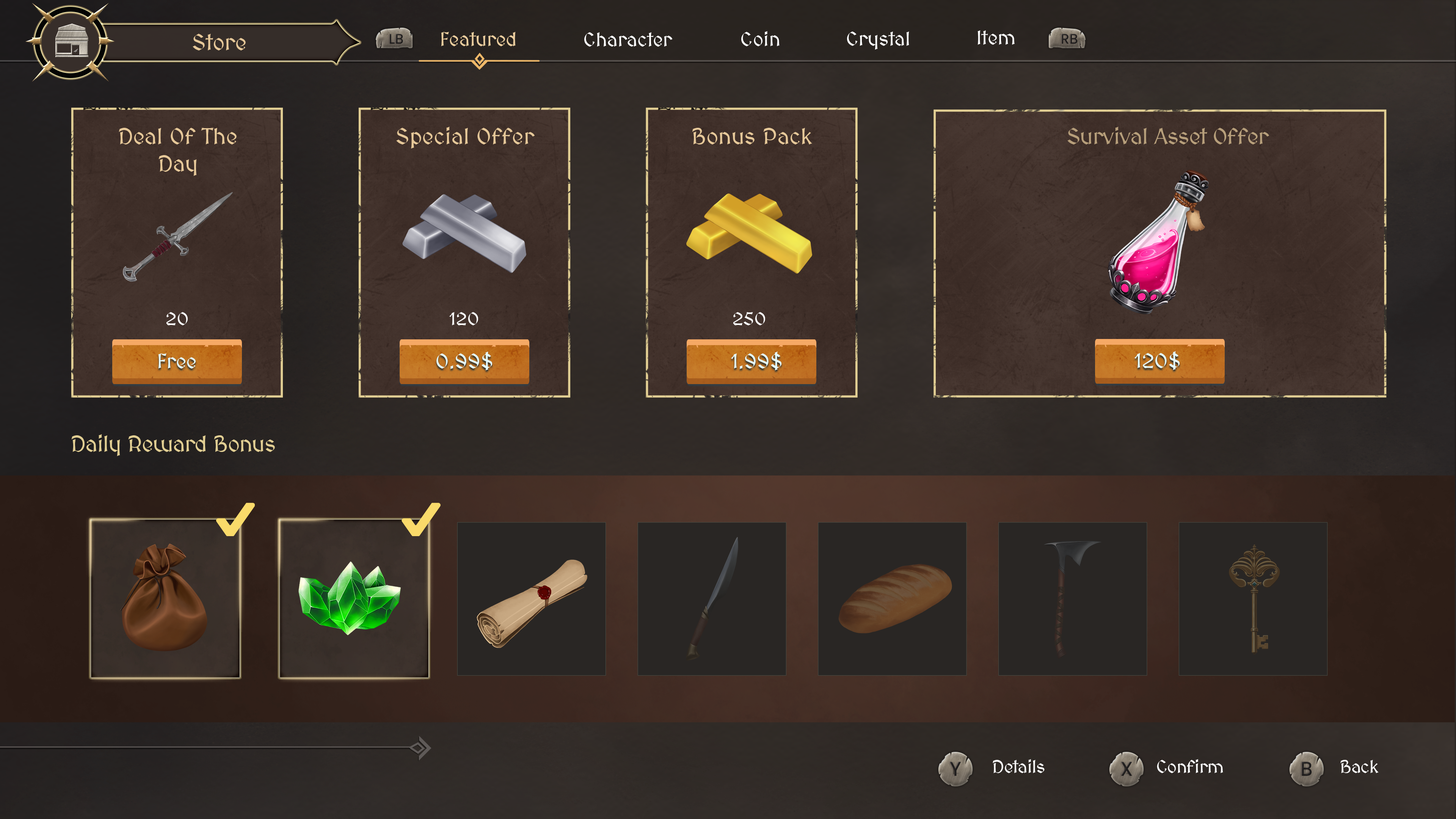
<style>
.page{position:relative;width:1456px;height:819px}
.page>*{position:absolute;margin:0}
.t1{font:22.7px "MedievalSharp";color:#e6c899}
.t2{font:19.8px "MedievalSharp";color:#ebcd9e}
.t3{font:19.8px "MedievalSharp";color:#ffffff}
.t4{font:22.7px "MedievalSharp";letter-spacing:-0.02em;color:#b79f7b}
.t5{font:18.2px "MedievalSharp";color:#ffffff}
.t6{font:20.5px "MedievalSharp";color:#e5fbfd}
.t7{font:22.7px "MedievalSharp";letter-spacing:-0.02em;color:#e1ce93}
.t8{font:18.2px "MedievalSharp";letter-spacing:-0.02em;color:#ffffff}
</style>
<div class="page">
<p class="t1" style="left:193px;top:34px;width:53px;height:16px">Store</p>
<p class="t2" style="left:441px;top:32px;width:75px;height:14px">Featured</p>
<p class="t3" style="left:584px;top:32px;width:89px;height:15px">Character</p>
<p class="t3" style="left:741px;top:31px;width:39px;height:15px">Coin</p>
<p class="t3" style="left:847px;top:31px;width:62px;height:19px">Crystal</p>
<p class="t3" style="left:977px;top:30px;width:38px;height:15px">Item</p>
<p class="t1" style="left:119px;top:128px;width:118px;height:48px">Deal Of The <br>      Day</p>
<p class="t1" style="left:396px;top:127px;width:139px;height:22px">Special Offer</p>
<p class="t1" style="left:692px;top:128px;width:120px;height:16px">Bonus Pack</p>
<p class="t4" style="left:1067px;top:127px;width:202px;height:17px">Survival Asset Offer</p>
<p class="t5" style="left:166px;top:312px;width:22px;height:13px">20</p>
<p class="t5" style="left:449px;top:312px;width:29px;height:13px">120</p>
<p class="t5" style="left:733px;top:312px;width:32px;height:13px">250</p>
<p class="t6" style="left:158px;top:353px;width:38px;height:16px">Free</p>
<p class="t6" style="left:436px;top:351px;width:56px;height:19px">0.99$</p>
<p class="t6" style="left:731px;top:351px;width:50px;height:19px">1.99$</p>
<p class="t6" style="left:1134px;top:351px;width:46px;height:19px">120$</p>
<p class="t7" style="left:71px;top:434px;width:204px;height:22px">Daily Reward Bonus</p>
<p class="t8" style="left:993px;top:759px;width:52px;height:14px">Details</p>
<p class="t8" style="left:1157px;top:759px;width:66px;height:14px">Confirm</p>
<p class="t8" style="left:1340px;top:760px;width:39px;height:13px">Back</p>
</div>
